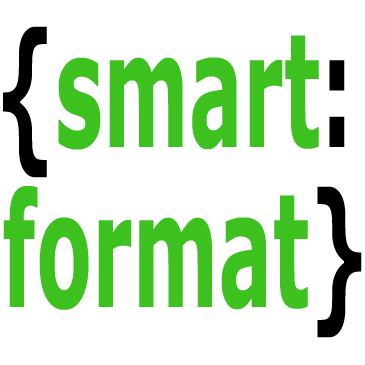
<style>
.page{position:relative;width:365px;height:365px;background:#ffffff}
.page>*{position:absolute;margin:0}
.t1{font:158.2px "Verdana-Bold";color:#3cc11e;scale:0.51 1}
.t2{font:158.2px "Verdana-Bold";color:#000000;scale:0.51 1}
</style>
<div class="page">
<p class="t1" style="left:3px;top:26px;width:342px;height:152px"><span class="t2">{</span>smart<span class="t2">:</span></p>
<p class="t1" style="left:3px;top:186px;width:359px;height:152px">format<span class="t2">}</span></p>
</div>
